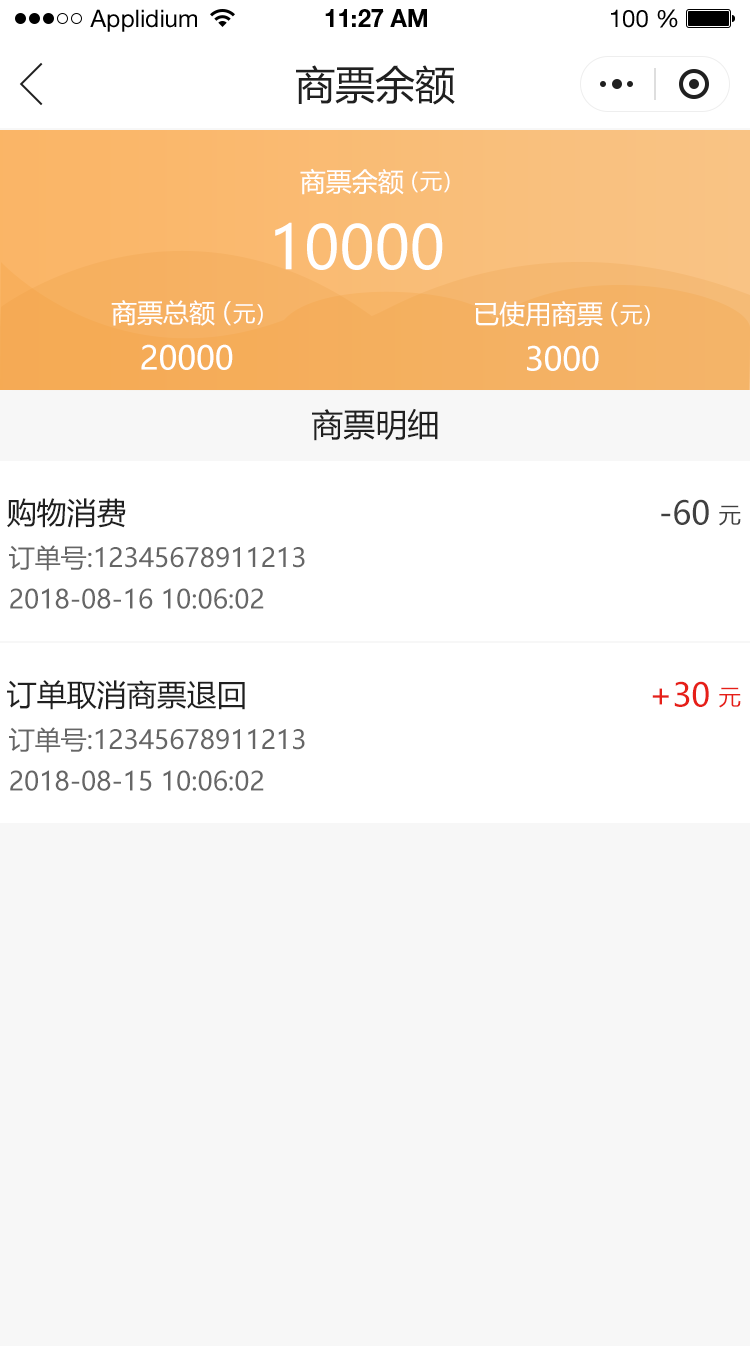
<style>
.page{position:relative;width:750px;height:1346px;background:#f7f7f7}
.page>*{position:absolute;margin:0}
.t1{font:24px "HelveticaNeueLTStd-Roman";color:#000000}
.t2{font:24px "HelveticaNeueLTStd-Bd";color:#000000}
.t3{font:40px "MicrosoftYaHei";color:#202020;text-transform:uppercase}
.t4{font:26px "MicrosoftYaHei";color:#ffffff;text-transform:uppercase}
.t5{font:22px "MicrosoftYaHei";color:#ffffff;text-transform:uppercase}
.t6{font:60px "MicrosoftYaHei";color:#ffffff;text-transform:uppercase}
.t7{font:32px "MicrosoftYaHei";color:#ffffff;text-transform:uppercase}
.t8{font:32px "MicrosoftYaHei";color:#202020;text-transform:uppercase}
.t9{font:30px "MicrosoftYaHei";color:#202020;text-transform:uppercase}
.t10{font:32px "MicrosoftYaHei";color:#404040;text-transform:uppercase}
.t11{font:22px "MicrosoftYaHei";color:#404040;text-transform:uppercase}
.t12{font:26px "MicrosoftYaHei";color:#666666;text-transform:uppercase}
.t13{font:32px "MicrosoftYaHei";color:#e61f18;text-transform:uppercase}
.t14{font:22px "MicrosoftYaHei";color:#e61f18;text-transform:uppercase}
</style>
<div class="page">
<p class="t1" style="left:90px;top:9px;width:107px;height:23px">Applidium</p>
<p class="t2" style="left:325px;top:9px;width:102px;height:18px">11:27 AM</p>
<p class="t1" style="left:611px;top:9px;width:67px;height:19px">100 %</p>
<p class="t3" style="left:296px;top:65px;width:159px;height:40px">商票余额</p>
<p class="t4" style="left:300px;top:168px;width:104px;height:27px">商票余额</p>
<p class="t5" style="left:412px;top:171px;width:38px;height:22px">（元）</p>
<p class="t6" style="left:275px;top:222px;width:168px;height:48px">10000</p>
<p class="t4" style="left:111px;top:300px;width:104px;height:26px">商票总额</p>
<p class="t5" style="left:224px;top:301px;width:39px;height:25px"><span class="t4">（</span>元）</p>
<p class="t4" style="left:475px;top:301px;width:128px;height:26px">已使用商票</p>
<p class="t5" style="left:611px;top:302px;width:39px;height:25px"><span class="t4">（</span>元）</p>
<p class="t7" style="left:141px;top:344px;width:92px;height:26px">20000</p>
<p class="t7" style="left:527px;top:345px;width:72px;height:26px">3000</p>
<p class="t8" style="left:312px;top:408px;width:126px;height:33px">商票明细</p>
<p class="t9" style="left:7px;top:498px;width:119px;height:30px">购物消费</p>
<p class="t10" style="left:661px;top:499px;width:48px;height:26px">-60</p>
<p class="t11" style="left:719px;top:505px;width:22px;height:21px">元</p>
<p class="t12" style="left:9px;top:545px;width:296px;height:26px">订单号:12345678911213</p>
<p class="t12" style="left:10px;top:588px;width:254px;height:21px">2018-08-16 10:06:02</p>
<p class="t9" style="left:7px;top:680px;width:238px;height:30px">订单取消商票退回</p>
<p class="t13" style="left:652px;top:681px;width:57px;height:26px">+30</p>
<p class="t14" style="left:719px;top:687px;width:22px;height:21px">元</p>
<p class="t12" style="left:9px;top:727px;width:296px;height:26px">订单号:12345678911213</p>
<p class="t12" style="left:10px;top:770px;width:254px;height:21px">2018-08-15 10:06:02</p>
</div>
